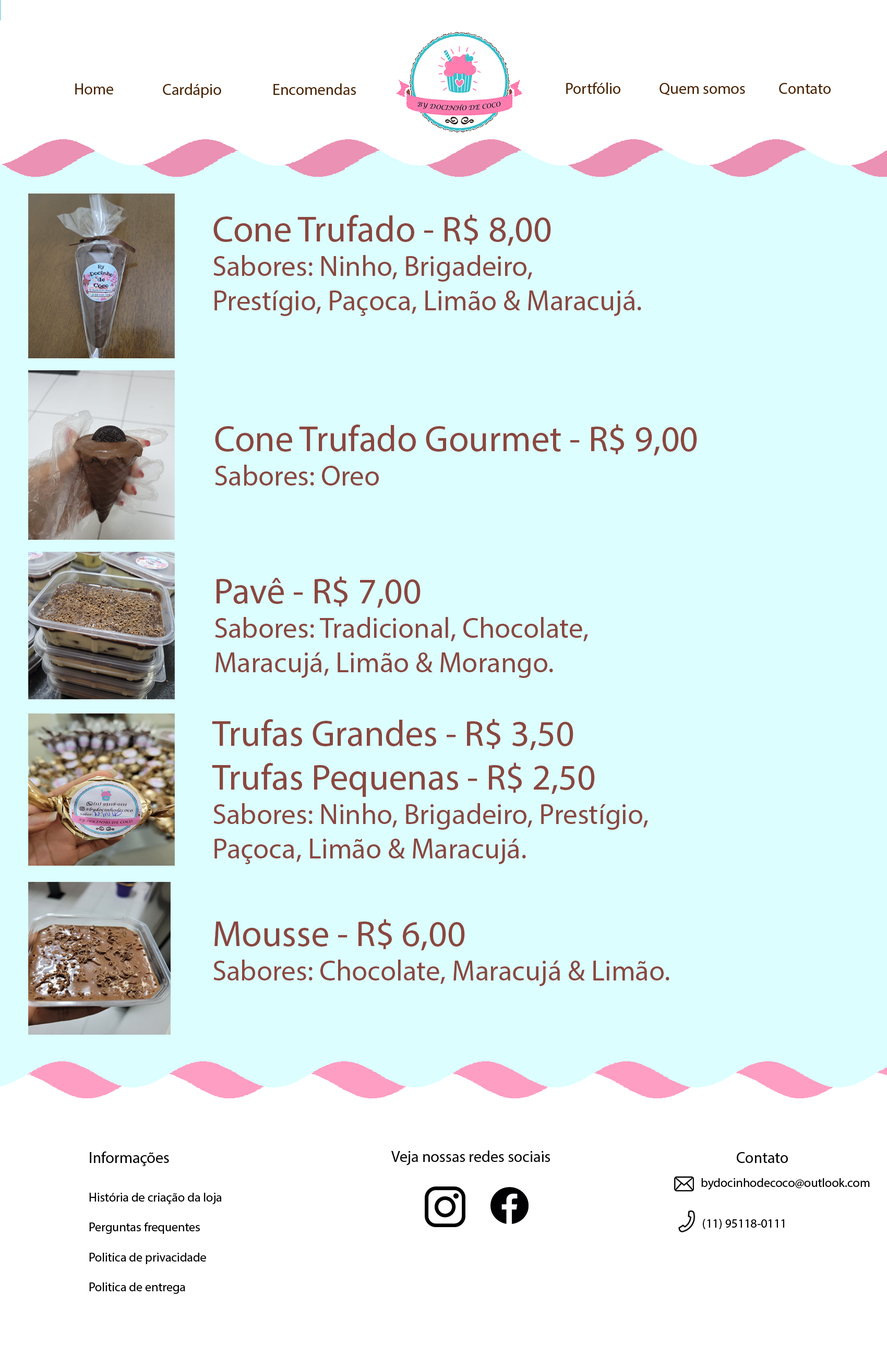
<style>
.page{position:relative;width:887px;height:1345px;background:#dcfeff}
.page>*{position:absolute;margin:0}
.t1{font:28.7px "MyriadPro-Regular";color:#8a473f}
.t2{font:36.5px "MyriadPro-Regular";color:#8a473f}
</style>
<div class="page">
<p class="t1" style="left:213px;top:214px;width:428px;height:102px"><span class="t2">Cone Trufado - R$ 8,00<br></span>Sabores: Ninho, Brigadeiro, <br>Prestígio, Paçoca, Limão &amp; Maracujá.</p>
<p class="t2" style="left:215px;top:424px;width:482px;height:62px">Cone Trufado Gourmet - R$ 9,00<br><span class="t1">Sabores: Oreo</span></p>
<p class="t1" style="left:215px;top:576px;width:373px;height:102px"><span class="t2">Pavê - R$ 7,00<br></span>Sabores: Tradicional, Chocolate, <br>Maracujá, Limão &amp; Morango.</p>
<p class="t1" style="left:212px;top:719px;width:436px;height:145px"><span class="t2">Trufas Grandes - R$ 3,50<br>Trufas Pequenas - R$ 2,50<br></span>Sabores: Ninho, Brigadeiro, Prestígio, Paçoca, Limão &amp; Maracujá.</p>
<p class="t1" style="left:213px;top:919px;width:456px;height:67px"><span class="t2">Mousse - R$ 6,00<br></span>Sabores: Chocolate, Maracujá &amp; Limão.</p>
</div>
